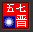
<style>
.page{position:relative;width:33px;height:32px;background:#f20000}
.page>*{position:absolute;margin:0}
.t1{font:10.4px "SimSun";color:#ffffff}
.t2{font:11.7px "SimSun";color:#ffffff}
</style>
<div class="page">
<p class="t1" style="left:7px;top:4px;width:19px;height:8px">五七</p>
<p class="t2" style="left:16px;top:15px;width:11px;height:12px">晋</p>
</div>
